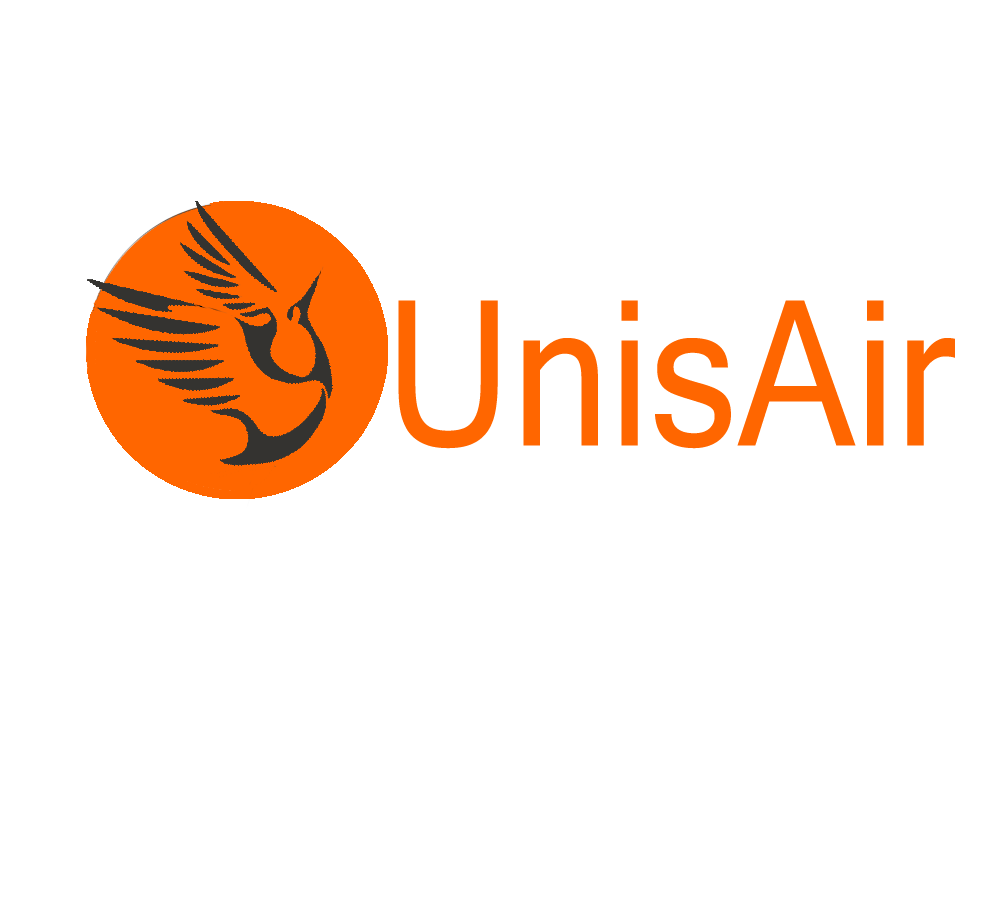
<style>
.page{position:relative;width:1000px;height:900px;background:#ffffff}
.page>*{position:absolute;margin:0}
.t1{font:225.7px "Vrinda";color:#ff6600;scale:0.87 1}
</style>
<div class="page">
<p class="t1" style="left:398px;top:300px;width:557px;height:149px">UnisAir</p>
</div>
